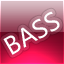
<style>
.page{position:relative;width:64px;height:64px}
.page>*{position:absolute;margin:0}
.t1{font:24px "MicrosoftYaHei";color:#ffffff}
</style>
<div class="page">
<p class="t1" style="left:3px;top:11px;width:57px;height:44px;rotate:-30deg">BASS</p>
</div>
